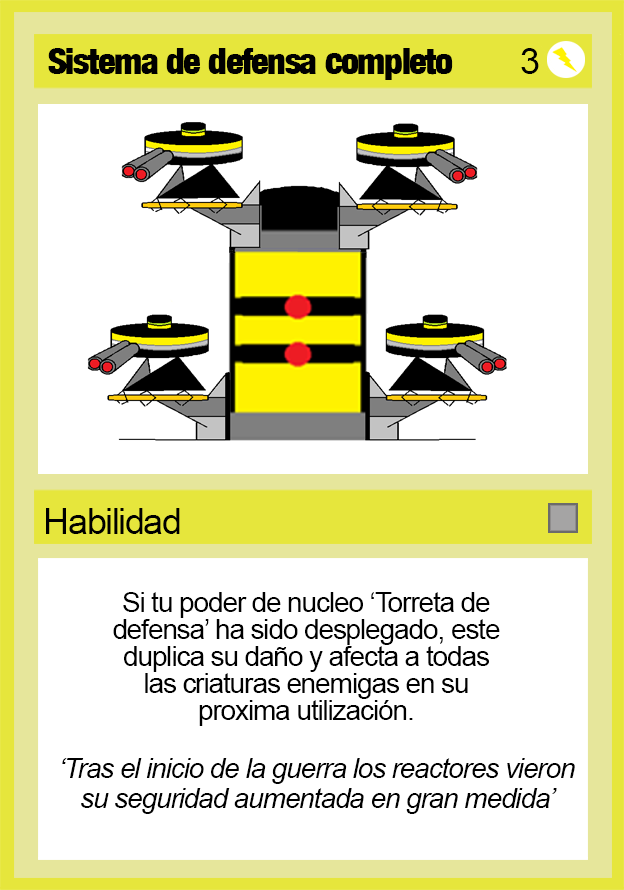
<style>
.page{position:relative;width:624px;height:890px;background:#ffffff}
.page>*{position:absolute;margin:0}
.t1{font:36px "Harvest";letter-spacing:-0.04em;color:#000000}
.t2{font:36px "ArialMT";letter-spacing:-0.04em;color:#000000}
.t3{font:28px/27px "ArialMT";letter-spacing:-0.04em;color:#000000}
.t4{font:28px/30px "Arial-ItalicMT";letter-spacing:-0.04em;color:#000000}
.t5{font:28px/54px "Arial-ItalicMT";letter-spacing:-0.04em;color:#000000}
</style>
<div class="page">
<p class="t1" style="left:48px;top:48px;width:405px;height:32px">Sistema de defensa completo</p>
<p class="t2" style="left:521px;top:48px;width:18px;height:26px">3</p>
<p class="t2" style="left:46px;top:508px;width:134px;height:26px">Habilidad</p>
<p class="t3" style="left:113px;top:592px;width:387px;height:134px;text-align:center">Si tu poder de nucleo ‘Torreta de defensa’ ha sido desplegado, este duplica su daño y afecta a todas las criaturas enemigas en su proxima utilización.</p>
<p class="t4" style="left:62px;top:758px;width:513px;height:56px;text-align:center"><span class="t5">‘</span>Tras el inicio de la guerra los reactores vieron su seguridad aumentada en gran medida’</p>
</div>
